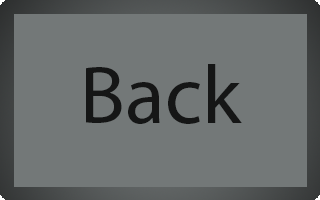
<style>
.page{position:relative;width:320px;height:200px;background:#737878}
.page>*{position:absolute;margin:0}
.t1{font:83.3px "MyriadHebrew-Regular";color:#151616}
</style>
<div class="page">
<p class="t1" style="left:86px;top:64px;width:156px;height:60px">Back</p>
</div>
